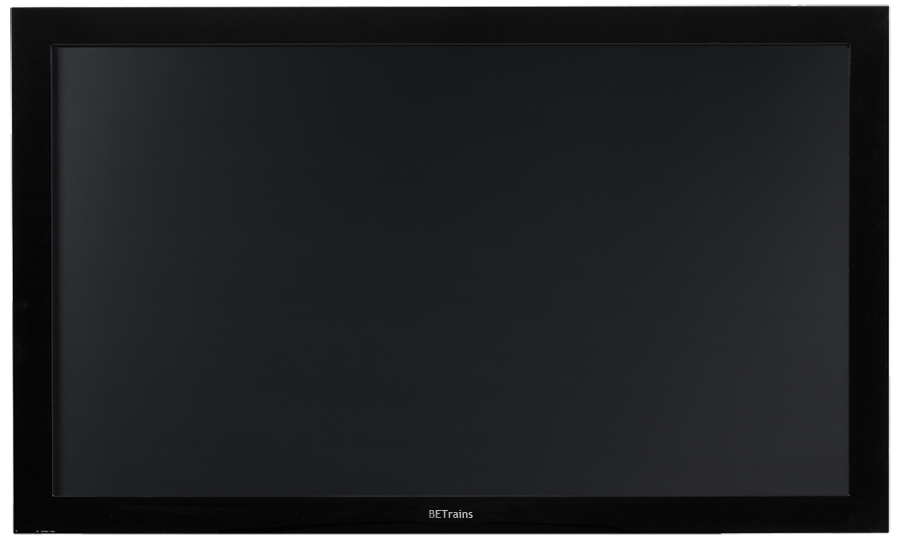
<style>
.page{position:relative;width:900px;height:540px}
.page>*{position:absolute;margin:0}
.t1{font:10.9px "TrebuchetMS-Bold";color:#b1b1b1}
</style>
<div class="page">
<p class="t1" style="left:429px;top:510px;width:44px;height:8px">BETrains</p>
</div>
